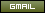
<style>
.page{position:relative;width:45px;height:13px}
.page>*{position:absolute;margin:0}
.t1{font:8px "BitDustTwo";color:#ffffff}
</style>
<div class="page">
<p class="t1" style="left:10px;top:4px;width:25px;height:5px">GMAIL</p>
</div>
